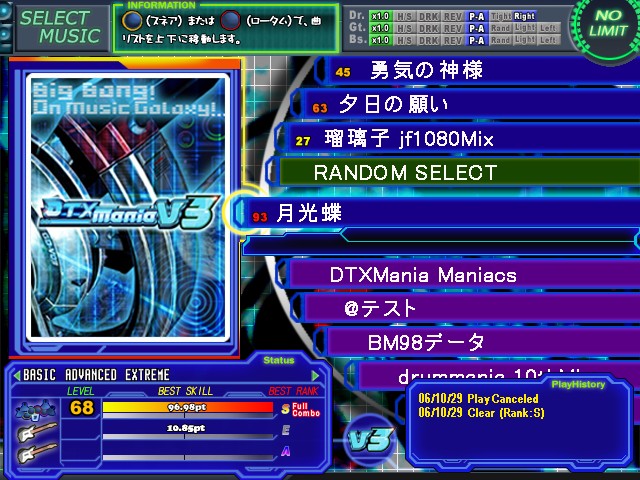
<style>
.page{position:relative;width:640px;height:480px}
.page>*{position:absolute;margin:0}
.t1{font:9.8px "FranklinGothic-Medium";color:#84f400;scale:1.14 1}
.t2{font:18px/18px "MSReferenceSansSerif";color:#82e2b2;font-style:italic}
.t3{font:12px/18px "DFCraftYu-W5-WING-RKSJ-H";color:#ffffff;font-weight:bold}
.t4{font:12px "Arial-Black";letter-spacing:0.05em;color:#a7a8a7;scale:0.83 1}
.t5{font:14px/15px "Myriad-Roman";color:#d0f09a;font-style:italic;scale:1.2 1}
.t6{font:14px/15px "Myriad-Roman";letter-spacing:-0.05em;color:#d0f09a;font-weight:bold;font-style:italic;scale:1.4 1}
.t7{font:22px/34px "MS-PGothic";color:#fdf8f8;font-weight:bold}
.t8{font:11px "Arial-Black";color:#fcb903;font-weight:bold}
.t9{font:11px "Arial-Black";color:#fc6703;font-weight:bold}
.t10{font:11px "Arial-Black";color:#fff605;font-weight:bold}
.t11{font:22px "MS-PGothic";color:#ffffff;font-weight:bold}
.t12{font:11px "Arial-Black";color:#ff1408;font-weight:bold}
.t13{font:11px "DFMaruGothic-Md-WIN-RKSJ-H";color:#4bf608;font-style:italic}
.t14{font:11px "DFMaruGothic-Md-WIN-RKSJ-H";color:#f3f608;font-style:italic}
.t15{font:11px "DFMaruGothic-Md-WIN-RKSJ-H";color:#f60808;font-style:italic}
.t16{font:18px "Arial-Black";color:#fec003}
.t17{font:12px "ArialNarrow";color:#fde800;font-weight:bold}
.t18{font:10px "CooperBlack";color:#fefcfc}
.t19{font:9px/7px "FranklinGothic-Medium";letter-spacing:0.1em;color:#fefbfb;scale:0.85 1}
</style>
<div class="page">
<p class="t1" style="left:128px;top:1px;width:67px;height:8px">INFORMATION</p>
<p class="t2" style="left:20px;top:11px;width:81px;height:32px">SELECT<br>   MUSIC</p>
<p class="t3" style="left:123px;top:15px;width:198px;height:29px">（スネア） または       （ロータム）で、曲<br>リストを上下に移動します。</p>
<p class="t4" style="left:349px;top:10px;width:18px;height:34px">Dr.<br>Gt.<br>Bs.</p>
<p class="t5" style="left:589px;top:10px;width:40px;height:26px;text-align:center"><span class="t6">NO<br></span>LIMIT</p>
<p class="t7" style="left:315px;top:60px;width:281px;height:358px">勇気の神様<br>     夕日の願い<br>     瑠璃子 jf1080Mix<br>    RANDOM SELECT<br><br><br>      DTXMania Maniacs<br>      @テスト<br>       BM98データ<br>         drummania 10thMix<br>        drummania 1st</p>
<p class="t8" style="left:335px;top:67px;width:15px;height:10px">45</p>
<p class="t9" style="left:313px;top:103px;width:14px;height:10px">63</p>
<p class="t10" style="left:296px;top:136px;width:14px;height:10px">27</p>
<p class="t11" style="left:277px;top:203px;width:64px;height:19px">月光蝶</p>
<p class="t12" style="left:253px;top:212px;width:14px;height:10px">93</p>
<p class="t1" style="left:263px;top:356px;width:32px;height:8px">Status</p>
<p class="t13" style="left:67px;top:386px;width:28px;height:9px">LEVEL</p>
<p class="t14" style="left:158px;top:386px;width:55px;height:9px">BEST SKILL</p>
<p class="t15" style="left:269px;top:386px;width:50px;height:9px">BEST RANK</p>
<p class="t1" style="left:552px;top:380px;width:54px;height:10px">PlayHistory</p>
<p class="t16" style="left:70px;top:400px;width:24px;height:15px">68</p>
<p class="t17" style="left:419px;top:393px;width:125px;height:26px">06/10/29 PlayCanceled<br>06/10/29 Clear (Rank:S)</p>
<p class="t18" style="left:168px;top:403px;width:38px;height:9px">96.98pt</p>
<p class="t19" style="left:293px;top:403px;width:27px;height:13px">Full<br>Combo</p>
<p class="t18" style="left:167px;top:424px;width:38px;height:9px">10.85pt</p>
</div>
